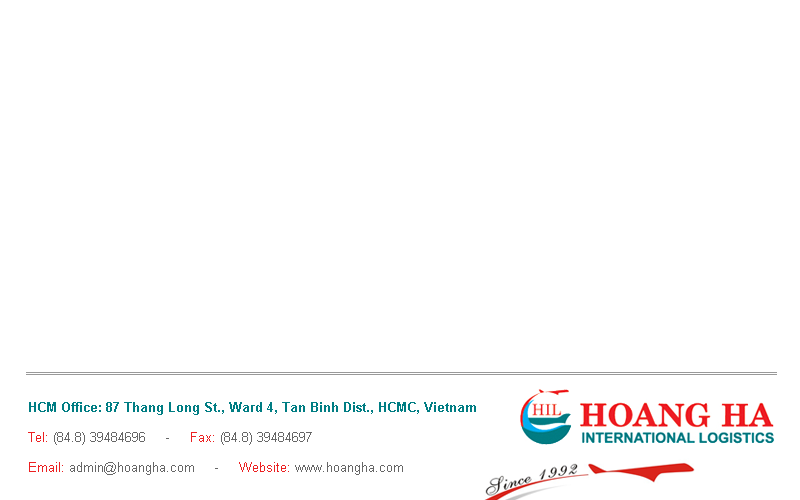
<style>
.page{position:relative;width:800px;height:500px;background:#ffffff}
.page>*{position:absolute;margin:0}
.t1{font:13px/20px "Arial-BoldMT";color:#007d83}
.t2{font:13px/20px "ArialMT";color:#ec2021}
.t3{font:13px/20px "ArialMT";color:#666666}
</style>
<div class="page">
<p class="t1" style="left:28px;top:402px;width:448px;height:73px">HCM Office: 87 Thang Long St., Ward 4, Tan Binh Dist., HCMC, Vietnam<br><span class="t2">Tel:</span><span class="t3"> (84.8) 39484696     -     </span><span class="t2">Fax:</span><span class="t3"> (84.8) 39484697<br></span><span class="t2">Email:</span><span class="t3"> admin@hoangha.com     -     </span><span class="t2">Website:</span><span class="t3"> www.hoangha.com</span></p>
</div>
